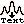
<style>
.page{position:relative;width:24px;height:24px;background:#ffffff}
.page>*{position:absolute;margin:0}
.t1{font:8.5px "Courier";color:#000000}
</style>
<div class="page">
<p class="t1" style="left:1px;top:18px;width:23px;height:5px">Text</p>
</div>
